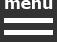
<style>
.page{position:relative;width:57px;height:42px;background:#333333}
.page>*{position:absolute;margin:0}
.t1{font:16.6px "Verdana-Bold";color:#ffffff;scale:0.94 1}
</style>
<div class="page">
<p class="t1" style="left:5px;top:0px;width:48px;height:9px">menu</p>
</div>
